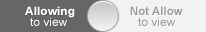
<style>
.page{position:relative;width:206px;height:32px;background:#666666}
.page>*{position:absolute;margin:0}
.t1{font:11.4px "Arial-BoldMT";color:#ffffff;scale:1.05 1}
.t2{font:11.4px "Arial-BoldMT";color:#a4a4a4}
.t3{font:11.4px "ArialMT";color:#ffffff;scale:1.05 1}
.t4{font:11.4px "ArialMT";color:#999999;scale:1.05 1}
</style>
<div class="page">
<p class="t1" style="left:25px;top:6px;width:50px;height:12px">Allowing</p>
<p class="t2" style="left:130px;top:6px;width:53px;height:9px">Not Allow</p>
<p class="t3" style="left:30px;top:17px;width:37px;height:9px">to view</p>
<p class="t4" style="left:138px;top:17px;width:37px;height:9px">to view</p>
</div>
